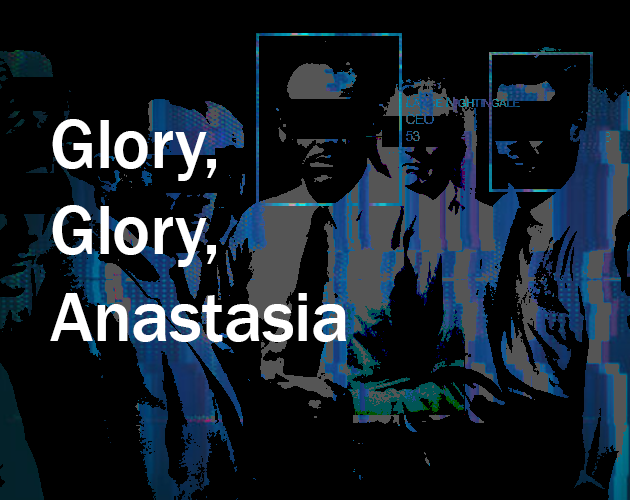
<style>
.page{position:relative;width:630px;height:500px;background:#000000}
.page>*{position:absolute;margin:0}
.t1{font:14px "ArialMT";letter-spacing:-0.05em;font-variant:small-caps}
.t2{font:72px "FranklinGothic-Medium";letter-spacing:-0.01em;color:#ffffff}
</style>
<div class="page">
<p class="t1" style="left:406px;top:97px;width:114px;height:44px">Lance Nightingale<br>CEO<br>53</p>
<p class="t2" style="left:50px;top:119px;width:297px;height:223px">Glory,<br>Glory, <br>Anastasia</p>
</div>
